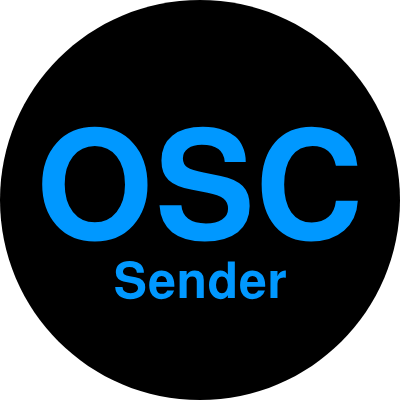
<style>
.page{position:relative;width:400px;height:400px;background:#000000}
.page>*{position:absolute;margin:0}
.t1{font:50px "FreeSansBold";color:#0098ff}
.t2{font:150px "FreeSansBold";color:#0098ff}
</style>
<div class="page">
<p class="t1" style="left:42px;top:126px;width:316px;height:174px;text-align:center"><span class="t2">OSC<br></span>Sender</p>
</div>
